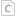
<style>
.page{position:relative;width:16px;height:16px;background:#fcfcfc}
.page>*{position:absolute;margin:0}
.t1{font:10px "OpenSans-Semibold";letter-spacing:0.02em;color:#b4b4b4}
</style>
<div class="page">
<p class="t1" style="left:4px;top:4px;width:7px;height:9px">C</p>
</div>
